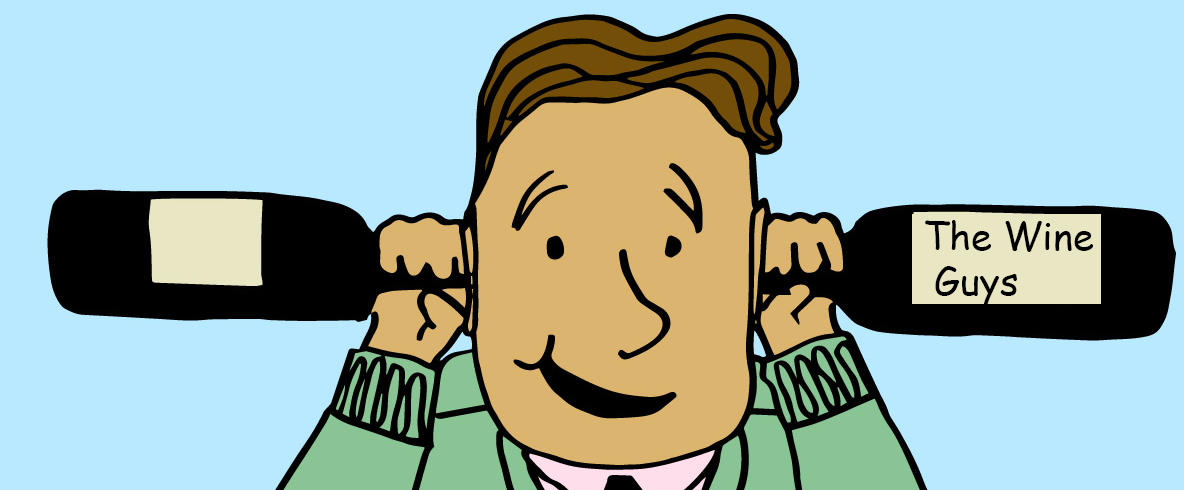
<style>
.page{position:relative;width:1184px;height:490px;background:#b9e9ff}
.page>*{position:absolute;margin:0}
.t1{font:38.1px "ComicSansMS";color:#000000}
</style>
<div class="page">
<p class="t1" style="left:925px;top:220px;width:169px;height:86px">The Wine<br> Guys</p>
</div>
